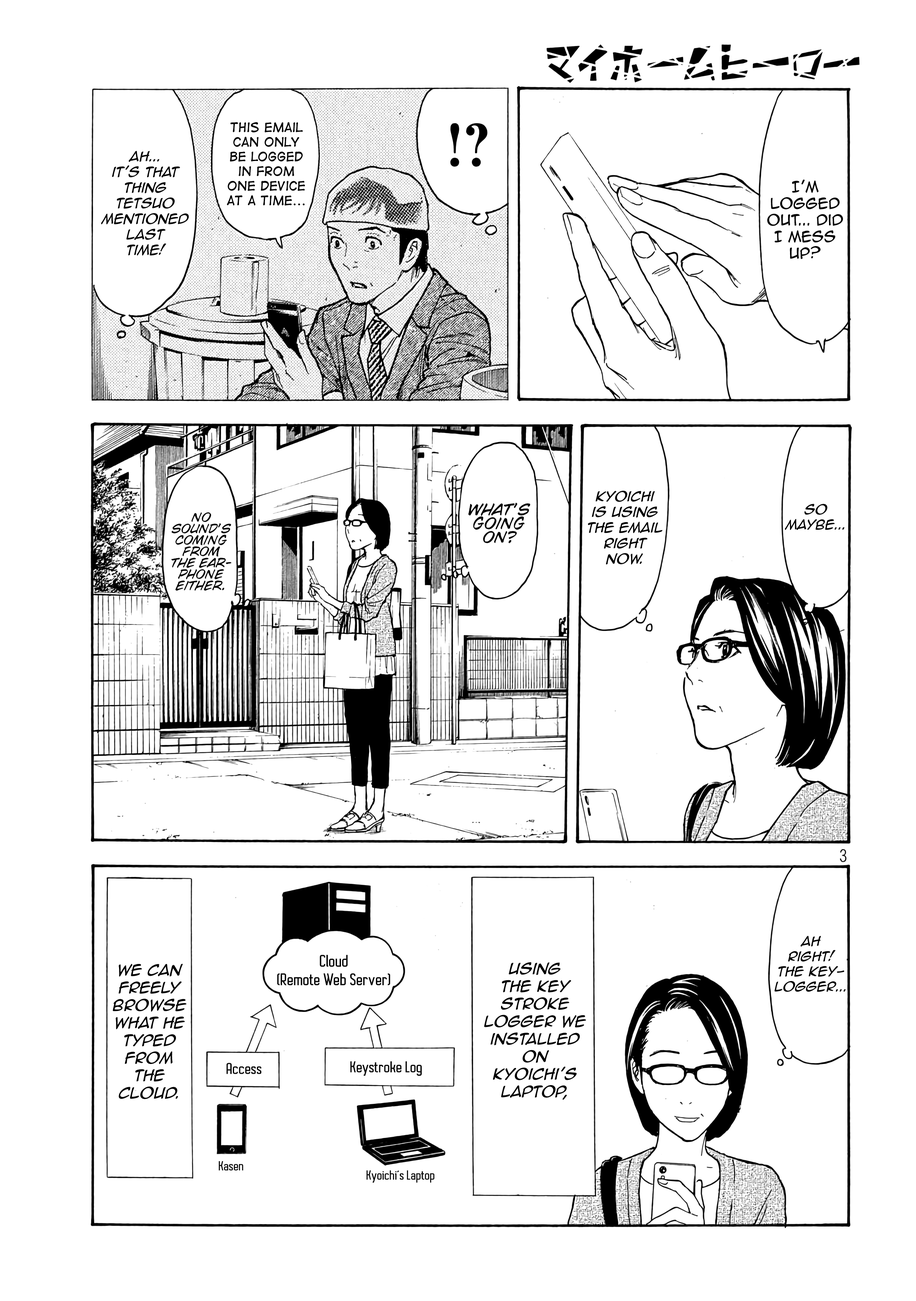
<style>
.page{position:relative;width:916px;height:1301px;background:#ffffff}
.page>*{position:absolute;margin:0}
.t1{font:12.2px "DigitalStrip";color:#000000}
.t2{font:13px "AnimeAce2.0BB-Italic";color:#000000}
.t3{font:13.8px "AnimeAce2.0BB";color:#000000}
.t4{font:12.6px "AnimeAce2.0BB-Italic";color:#000000}
.t5{font:14.6px "AnimeAce2.0BB-Italic";color:#000000}
.t6{font:15.5px "AutobusBold";color:#000000}
.t7{font:14.6px "AutobusBold";color:#000000}
.t8{font:12.2px "AutobusBold";color:#000000}
</style>
<div class="page">
<p class="t1" style="left:227px;top:122px;width:78px;height:84px;text-align:center">This email<br>can only<br>be logged<br>in from<br>one device<br>at a time...</p>
<p class="t2" style="left:101px;top:151px;width:88px;height:105px;text-align:center">Ah...<br>it’s that<br>thing<br>tetsuo<br>mentioned<br>last<br>time!</p>
<p class="t3" style="left:768px;top:179px;width:76px;height:80px;text-align:center">I’m<br>logged<br>out... did<br>I mess<br>up?</p>
<p class="t2" style="left:588px;top:491px;width:75px;height:74px;text-align:center">kyoichi<br>is using<br>the email<br>right<br>now.</p>
<p class="t4" style="left:785px;top:504px;width:60px;height:26px;text-align:center">so<br>maybe...</p>
<p class="t4" style="left:775px;top:936px;width:71px;height:56px;text-align:center">ah<br>right!<br>the key-<br>logger...</p>
<p class="t5" style="left:113px;top:964px;width:74px;height:135px;text-align:center">we can freely browse what he typed from the cloud.</p>
<p class="t6" style="left:277px;top:955px;width:113px;height:31px;text-align:center">Cloud<br>(Remote Web Server)</p>
<p class="t5" style="left:484px;top:962px;width:102px;height:138px;text-align:center">Using <br>the key stroke logger we installed on <br>kyoichi’s laptop,</p>
<p class="t7" style="left:350px;top:1061px;width:72px;height:15px">Keystroke Log</p>
<p class="t7" style="left:226px;top:1063px;width:35px;height:11px">Access</p>
<p class="t8" style="left:219px;top:1161px;width:25px;height:10px">Kasen</p>
<p class="t8" style="left:367px;top:1170px;width:68px;height:13px">Kyoichi’s Laptop</p>
</div>
